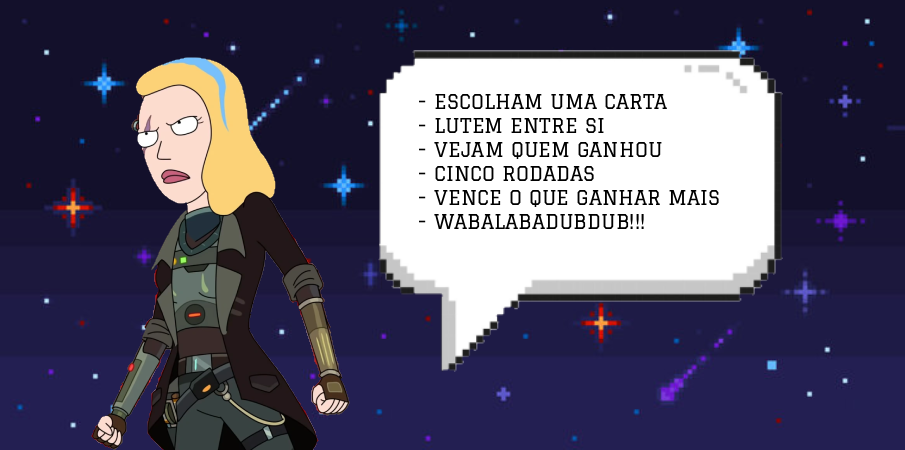
<style>
.page{position:relative;width:905px;height:450px;background:#13102b}
.page>*{position:absolute;margin:0}
.t1{font:20px "Graduate-Regular";color:#000000}
</style>
<div class="page">
<p class="t1" style="left:419px;top:94px;width:300px;height:135px">- ESCOLHAM UMA CARTA<br>- LUTEM ENTRE SI<br>- VEJAM QUEM GANHOU<br>- CINCO RODADAS<br>- VENCE O QUE GANHAR MAIS<br>- WABALABADUBDUB!!!</p>
</div>
